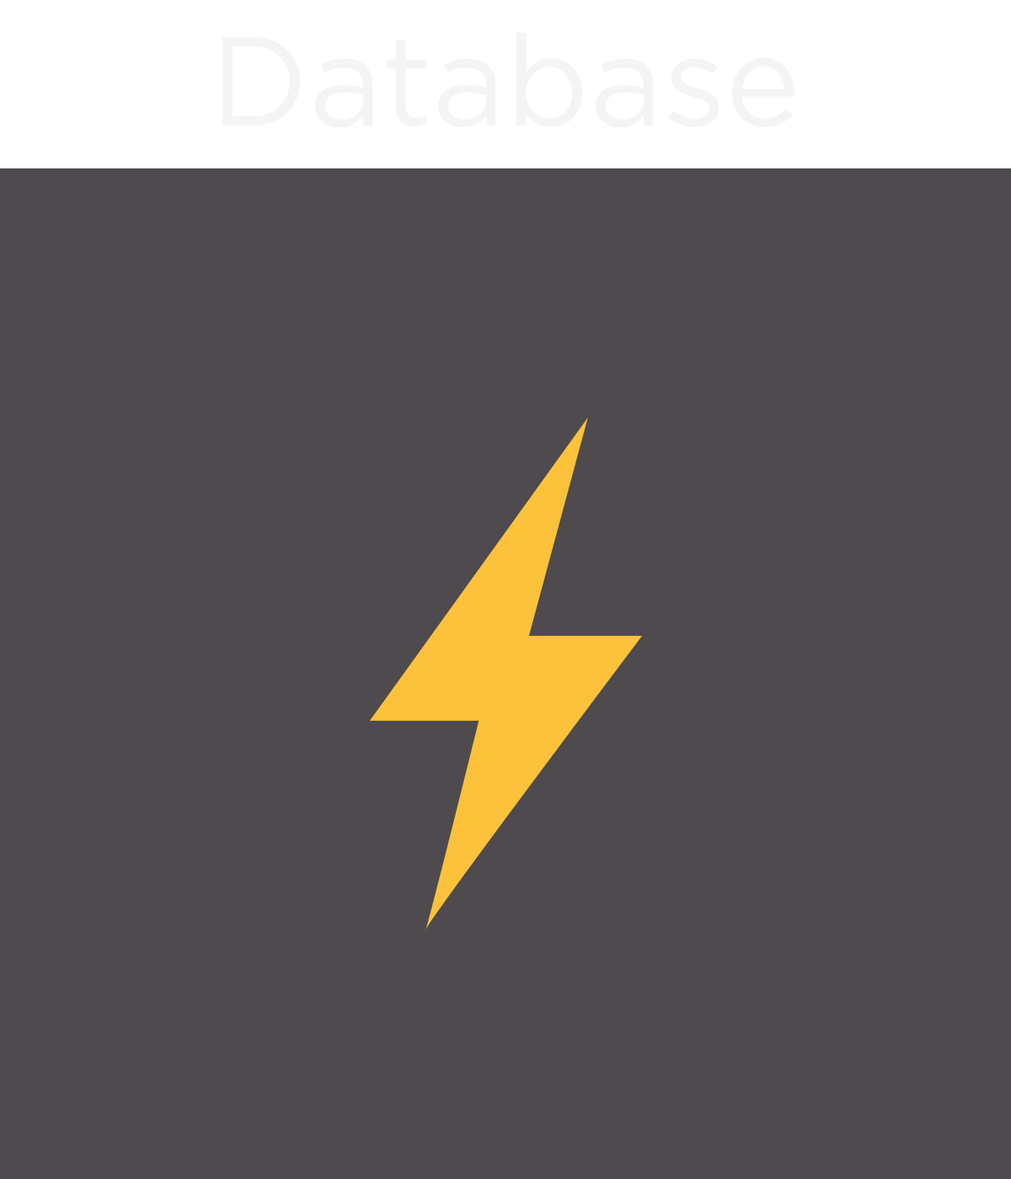
<style>
.page{position:relative;width:1011px;height:1179px;background:#4e4a4d}
.page>*{position:absolute;margin:0}
.t1{font:126.4px "Gotham-Book";color:#f4f4f4}
</style>
<div class="page">
<p class="t1" style="left:222px;top:32px;width:572px;height:96px">Database</p>
</div>
